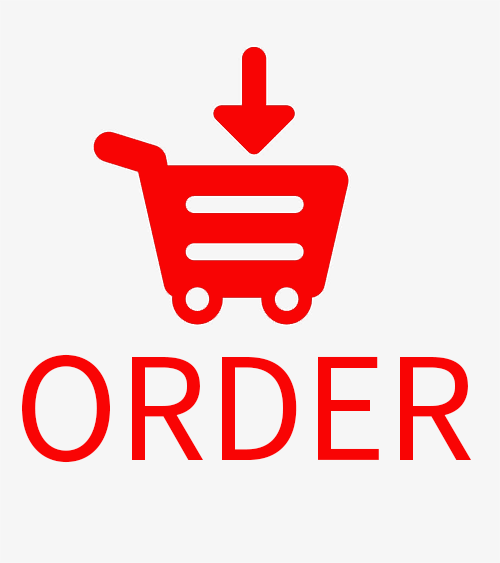
<style>
.page{position:relative;width:500px;height:563px;background:#f6f6f6}
.page>*{position:absolute;margin:0}
.t1{font:140.4px "NotoSansHans-Regular";color:#f90404}
</style>
<div class="page">
<p class="t1" style="left:22px;top:354px;width:450px;height:109px">ORDER</p>
</div>
